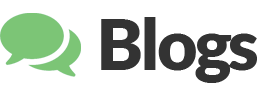
<style>
.page{position:relative;width:257px;height:91px;background:#ffffff}
.page>*{position:absolute;margin:0}
.t1{font:69.9px "Lato-Black";letter-spacing:-0.04em;color:#333333}
</style>
<div class="page">
<p class="t1" style="left:101px;top:17px;width:156px;height:66px">Blogs</p>
</div>
